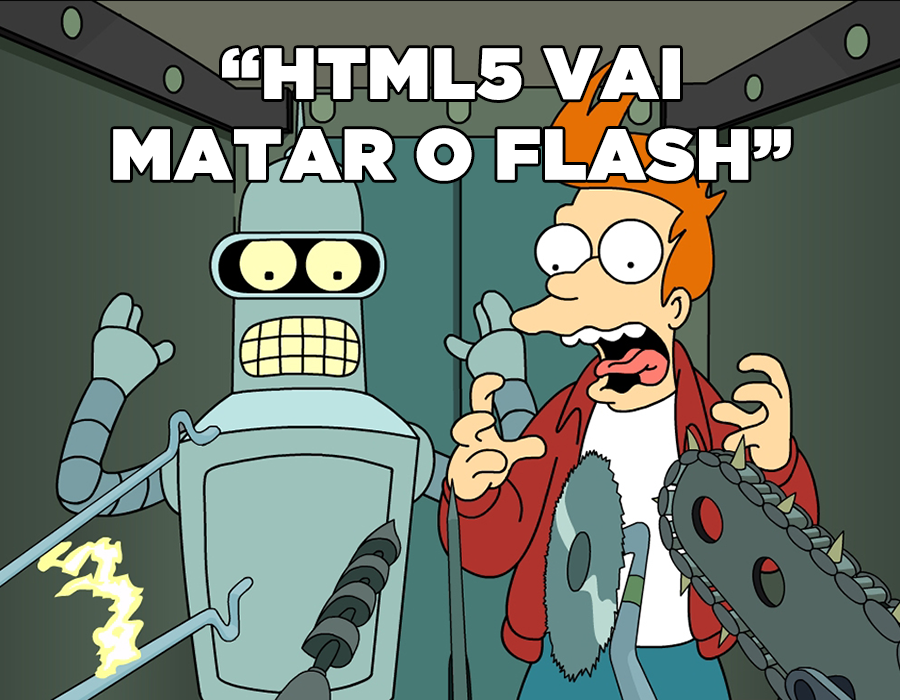
<style>
.page{position:relative;width:900px;height:700px}
.page>*{position:absolute;margin:0}
.t1{font:71.2px/80.9px "GothamUltra";color:#ffffff;font-weight:bold}
</style>
<div class="page">
<p class="t1" style="left:113px;top:48px;width:678px;height:133px;text-align:center">“HTML5 VAI<br>MATAR O FLASH”</p>
</div>
